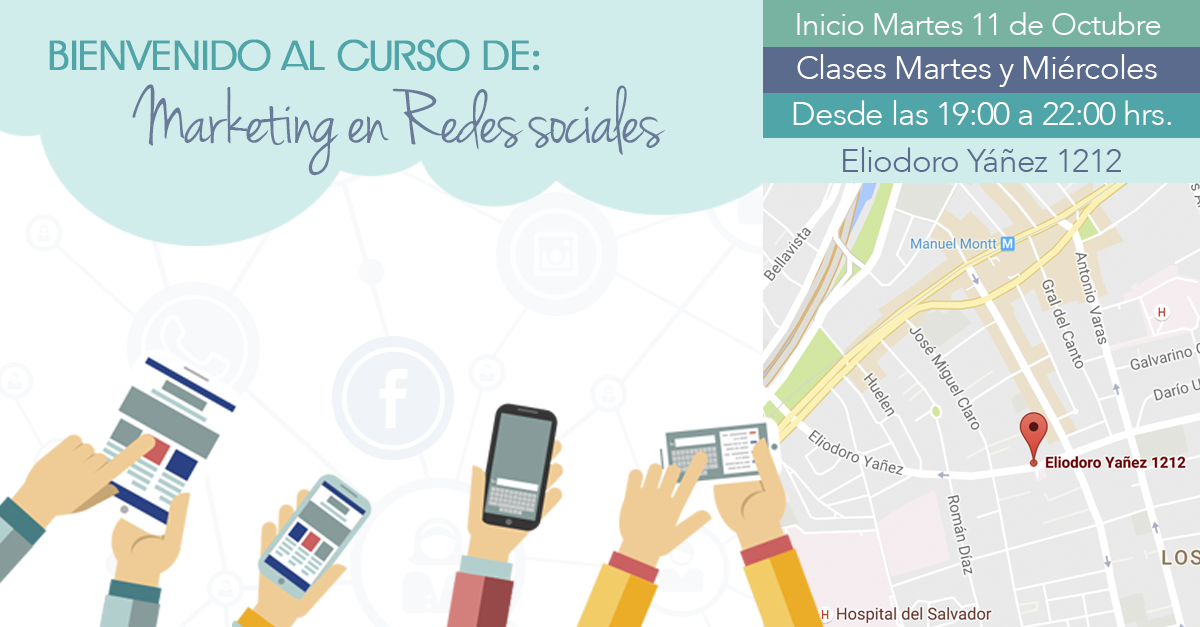
<style>
.page{position:relative;width:1200px;height:627px;background:#ffffff}
.page>*{position:absolute;margin:0}
.t1{font:31.5px "Avenir-Light";letter-spacing:-0.025em;color:#ffffff}
.t2{font:28.8px "Avenir-Light";letter-spacing:-0.025em;color:#dc983f;text-transform:uppercase}
.t3{font:41.7px "RioGlamour";letter-spacing:-0.025em;color:#4fa5a8;text-transform:uppercase;font-weight:bold}
.t4{font:41.7px "MyriadPro-Regular";letter-spacing:-0.025em;color:#4fa5a8;text-transform:uppercase;font-weight:bold}
.t5{font:33.3px "Avenir-Light";letter-spacing:-0.025em;color:#ffffff}
.t6{font:83.3px "JennaSue";letter-spacing:-0.025em;color:#5b6b8e}
.t7{font:33.3px "Avenir-Light";letter-spacing:-0.025em;color:#5b6b8e}
</style>
<div class="page">
<p class="t1" style="left:797px;top:12px;width:364px;height:23px"><span class="t2"><br><br><br><br></span>Inicio Martes 11 de Octubre</p>
<p class="t3" style="left:49px;top:39px;width:491px;height:32px">bienvenido al curso de<span class="t4">:</span></p>
<p class="t5" style="left:797px;top:54px;width:360px;height:33px">Clases Martes y Miércoles</p>
<p class="t6" style="left:132px;top:84px;width:534px;height:92px;opacity:0.9">Marketing en Redes sociales</p>
<p class="t5" style="left:793px;top:100px;width:378px;height:25px">Desde las 19:00 a 22:00 hrs.</p>
<p class="t7" style="left:843px;top:147px;width:278px;height:25px">Eliodoro Yáñez 1212</p>
</div>
